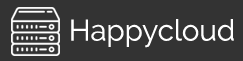
<style>
.page{position:relative;width:243px;height:61px;background:#333333}
.page>*{position:absolute;margin:0}
.t1{font:29.4px "Raleway-Regular";color:#ffffff}
</style>
<div class="page">
<p class="t1" style="left:71px;top:19px;width:163px;height:29px">Happycloud</p>
</div>
